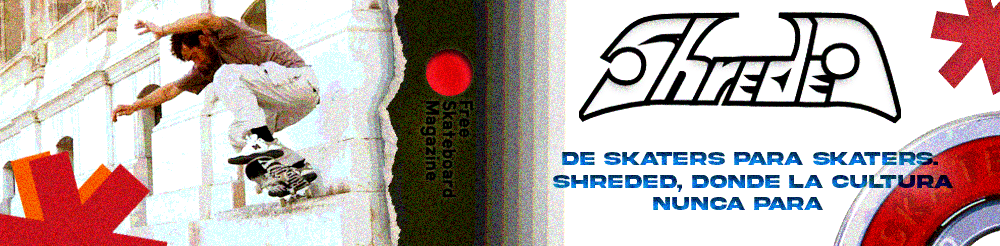
<style>
.page{position:relative;width:1000px;height:246px;background:#ffffff}
.page>*{position:absolute;margin:0}
.t1{font:18.7px "AkiraExpanded-SuperBold"}
</style>
<div class="page">
<p class="t1" style="left:553px;top:152px;width:400px;height:58px">De skaters para skaters. <br>Shreded, donde la cultura <br>           nunca para</p>
</div>
